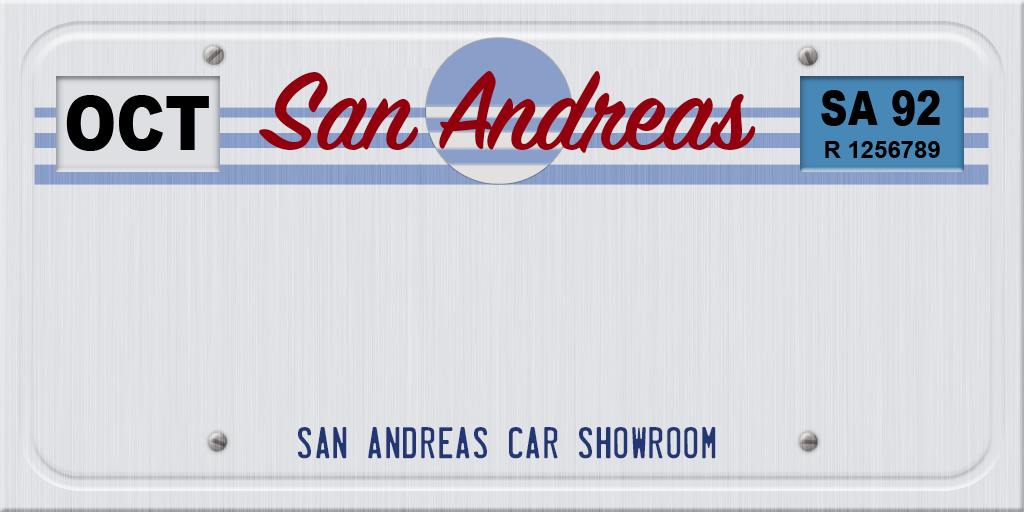
<style>
.page{position:relative;width:1024px;height:512px}
.page>*{position:absolute;margin:0}
.t1{font:120px "SignPainterHouseScript-Bold";color:#92000d}
.t2{font:40px "LicensePlate";color:#243775}
</style>
<div class="page">
<p class="t1" style="left:259px;top:71px;width:497px;height:82px">San Andreas</p>
<p class="t2" style="left:298px;top:427px;width:418px;height:32px">SAN ANDREAS CAR SHOWROOM</p>
</div>
